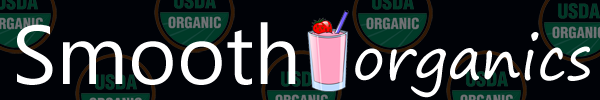
<style>
.page{position:relative;width:600px;height:100px;background:#000207}
.page>*{position:absolute;margin:0}
.t1{font:83.3px "SegoeUISymbol";color:#ffffff}
.t2{font:58.3px "SegoePrint";color:#ffffff}
</style>
<div class="page">
<p class="t1" style="left:17px;top:22px;width:279px;height:63px">Smooth</p>
<p class="t2" style="left:355px;top:32px;width:235px;height:66px">organics</p>
</div>
